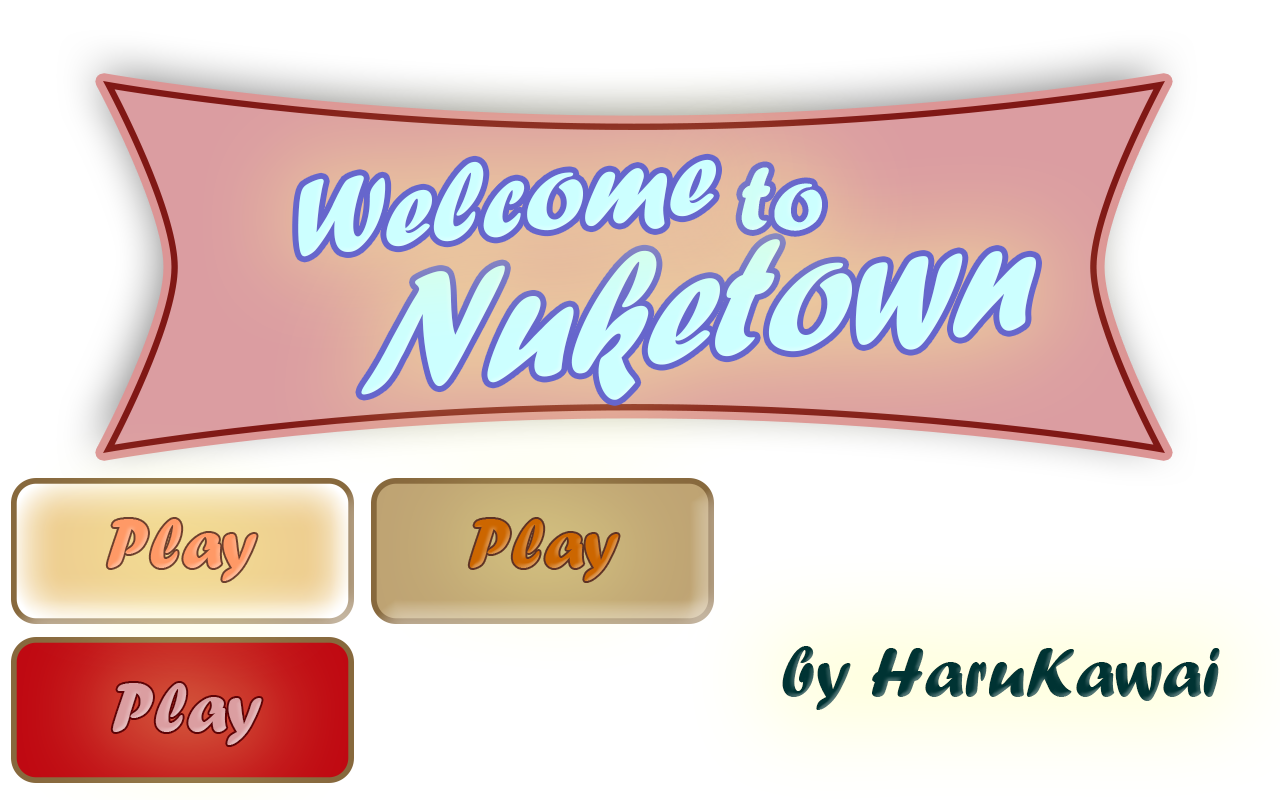
<style>
.page{position:relative;width:1280px;height:800px;background:#ffffff}
.page>*{position:absolute;margin:0}
.t1{font:114.3px "ForteMT";color:#ccffff}
.t2{font:95.8px "ForteMT";color:#ccffff}
.t3{font:180.3px "ForteMT";color:#ccffff;scale:0.86 1}
.t4{font:72px "ForteMT";color:#ff9966}
.t5{font:72px "ForteMT";color:#cc6600}
.t6{font:72px "ForteMT";color:#003333}
.t7{font:72px "ForteMT";color:#db9ea1}
</style>
<div class="page">
<p class="t1" style="left:298px;top:159px;width:418px;height:98px;rotate:-6deg">Welcome</p>
<p class="t2" style="left:741px;top:167px;width:81px;height:64px;rotate:-1deg">to</p>
<p class="t3" style="left:361px;top:239px;width:675px;height:161px;rotate:-6deg">Nuketown</p>
<p class="t4" style="left:107px;top:519px;width:150px;height:62px">Play</p>
<p class="t5" style="left:469px;top:519px;width:150px;height:62px">Play</p>
<p class="t6" style="left:782px;top:646px;width:438px;height:64px">by HaruKawai</p>
<p class="t7" style="left:112px;top:683px;width:150px;height:62px">Play</p>
</div>
